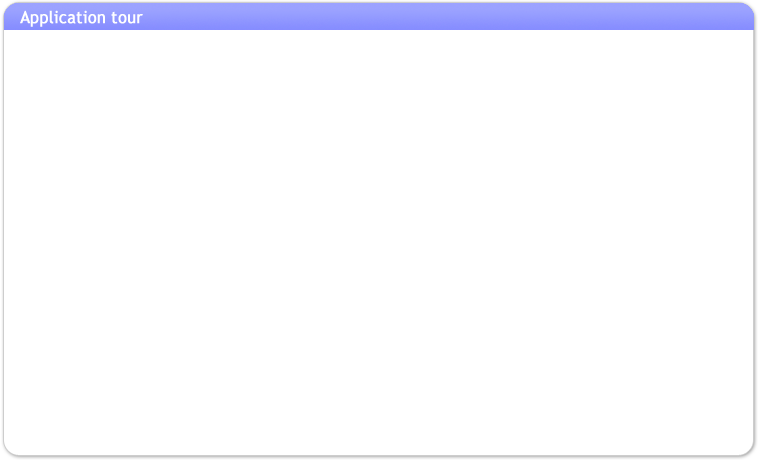
<style>
.page{position:relative;width:758px;height:464px;background:#ffffff}
.page>*{position:absolute;margin:0}
.t1{font:16.8px "TrebuchetMS";color:#ffffff;font-weight:bold;scale:0.95 1}
</style>
<div class="page">
<p class="t1" style="left:20px;top:10px;width:123px;height:17px">Application tour</p>
</div>
